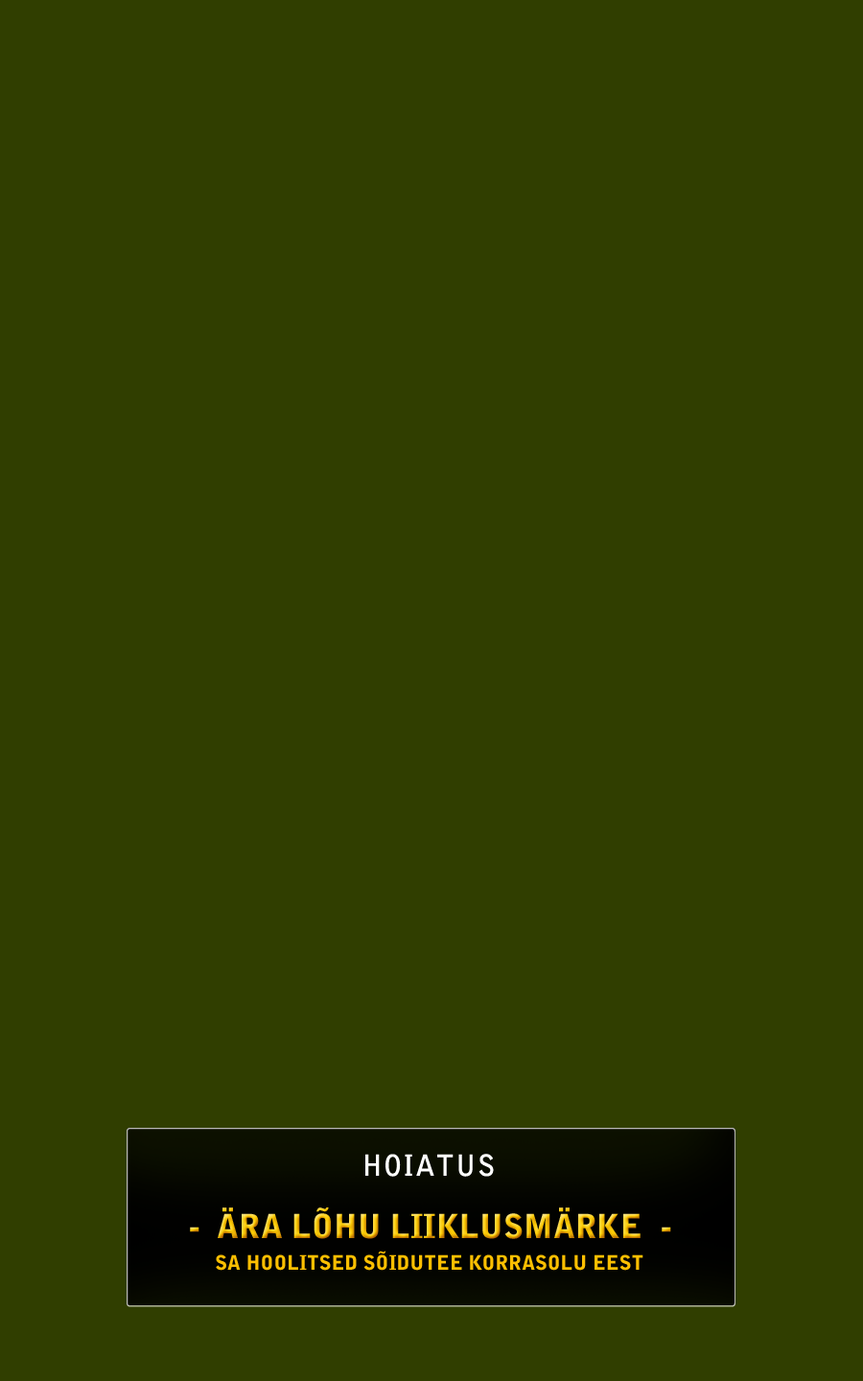
<style>
.page{position:relative;width:863px;height:1381px;background:#303e00}
.page>*{position:absolute;margin:0}
.t1{font:28.8px "BellGothicStd-Bold";letter-spacing:0.05em;color:#fefefe}
.t2{font:32.9px "BellGothicStd-Black"}
.t3{font:19.9px "BellGothicStd-Black";color:#fdbf01;text-transform:uppercase}
</style>
<div class="page">
<p class="t1" style="left:365px;top:1154px;width:129px;height:23px">HOIATUS</p>
<p class="t2" style="left:190px;top:1208px;width:481px;height:31px">-  ÄRA LÕHU LIIKLUSMÄRKE  -</p>
<p class="t3" style="left:216px;top:1251px;width:428px;height:20px">sa hoolitsed sõidutee korrasolu eest</p>
</div>
